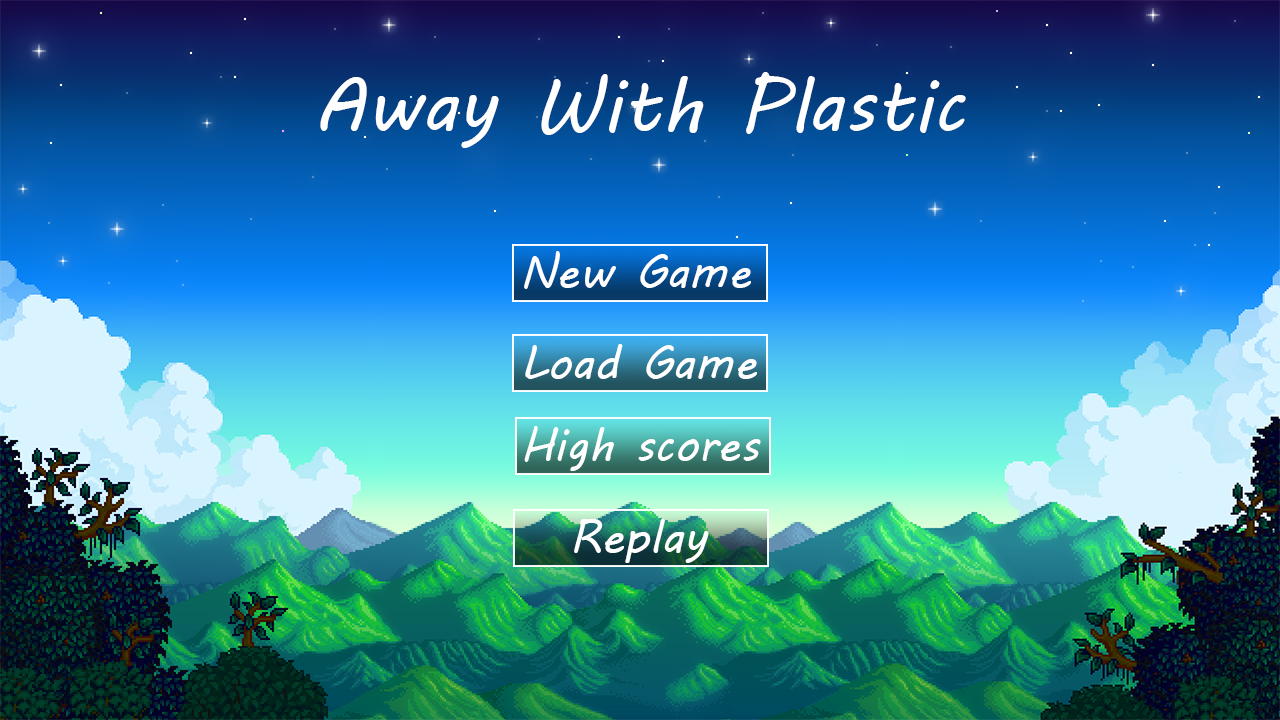
<style>
.page{position:relative;width:1280px;height:720px}
.page>*{position:absolute;margin:0}
.t1{font:75px "MVBoli";color:#ffffff}
.t2{font:45.8px "MVBoli";color:#ffffff}
</style>
<div class="page">
<p class="t1" style="left:320px;top:72px;width:646px;height:76px">Away With Plastic</p>
<p class="t2" style="left:524px;top:251px;width:227px;height:38px">New Game</p>
<p class="t2" style="left:525px;top:344px;width:232px;height:35px">Load Game</p>
<p class="t2" style="left:524px;top:426px;width:237px;height:45px">High scores</p>
<p class="t2" style="left:574px;top:519px;width:135px;height:44px">Replay</p>
</div>
